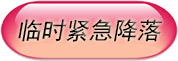
<style>
.page{position:relative;width:178px;height:61px}
.page>*{position:absolute;margin:0}
.t1{font:24px "SimHei";font-style:italic}
</style>
<div class="page">
<p class="t1" style="left:18px;top:19px;width:145px;height:23px">临时紧急降落</p>
</div>
